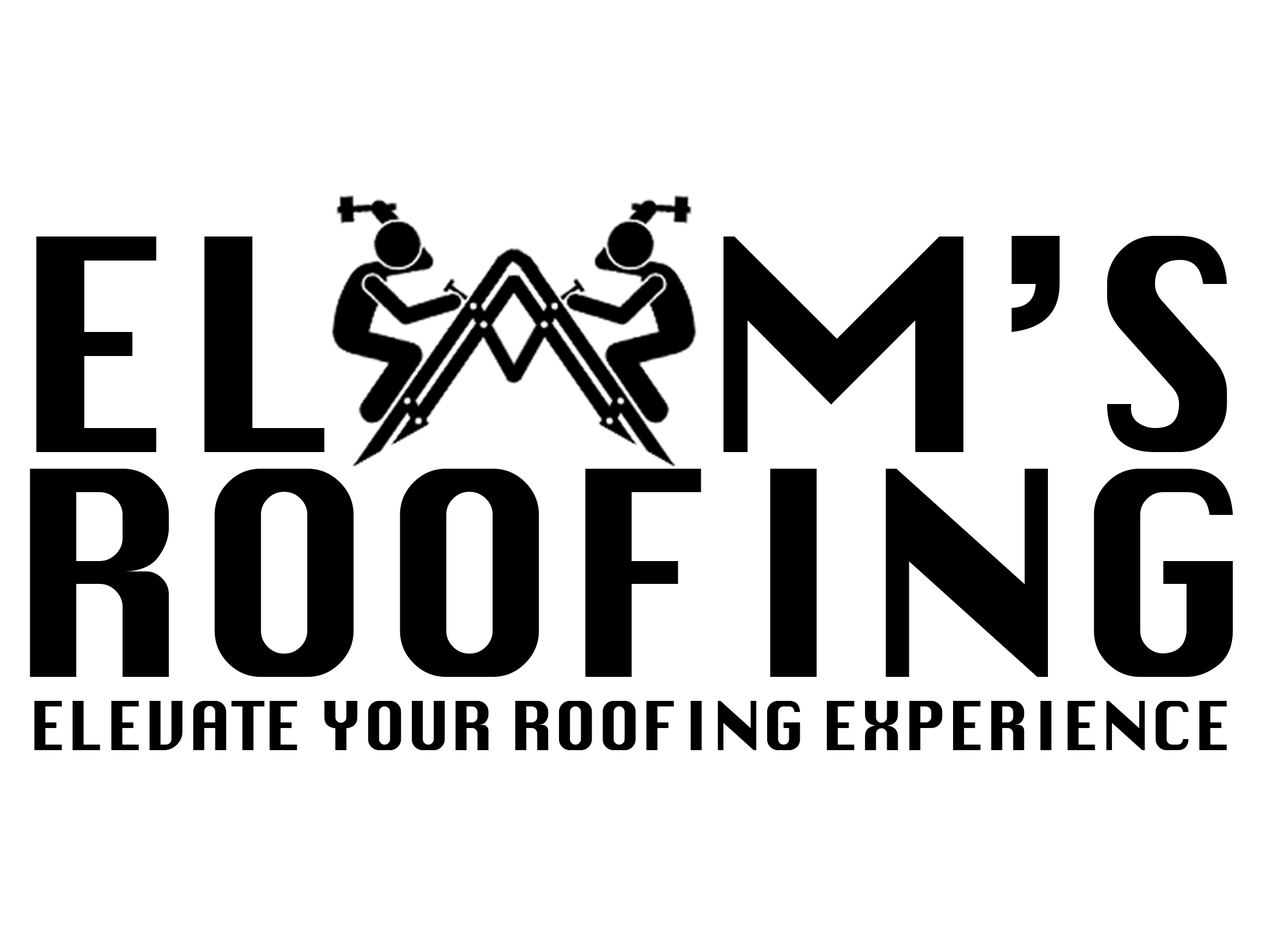
<style>
.page{position:relative;width:1261px;height:946px;background:#ffffff}
.page>*{position:absolute;margin:0}
.t1{font:287.7px "Krungthep";color:#000000}
.t2{font:277.7px "Krungthep";color:#000000}
.t3{font:65.7px "Krungthep";color:#000000}
</style>
<div class="page">
<p class="t1" style="left:36px;top:236px;width:1191px;height:216px">EL     M’S</p>
<p class="t2" style="left:30px;top:469px;width:1203px;height:208px">ROOFING</p>
<p class="t3" style="left:34px;top:701px;width:1193px;height:49px">ELEVATE YOUR ROOFING EXPERIENCE</p>
</div>
